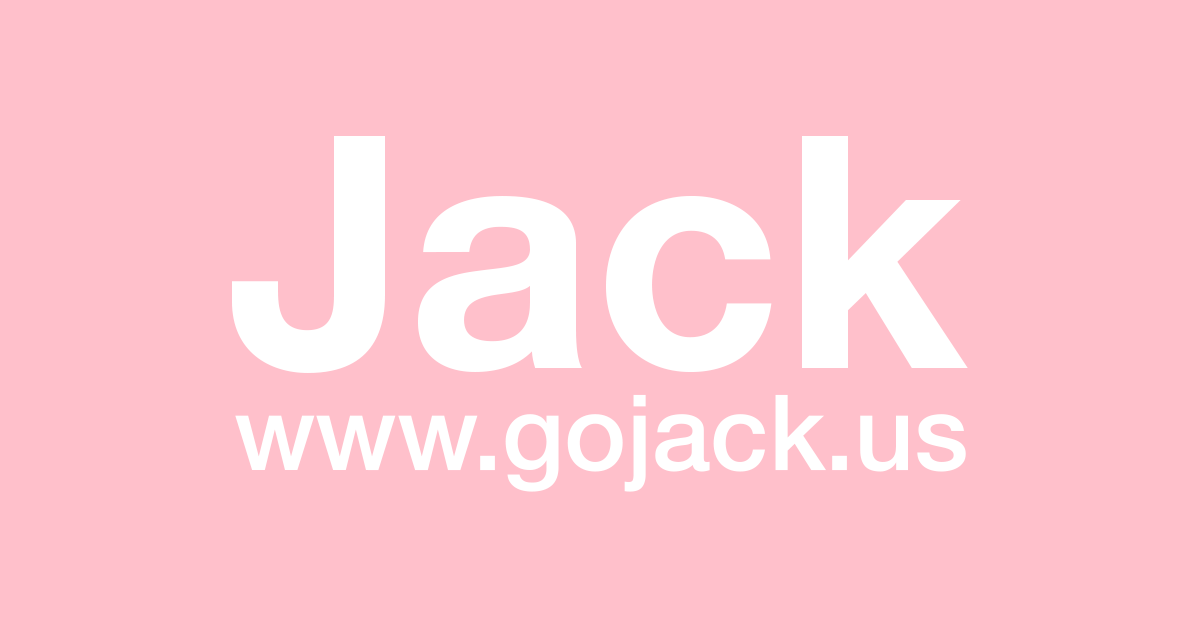
<style>
.page{position:relative;width:1200px;height:630px;background:#ffc0cb}
.page>*{position:absolute;margin:0}
.t1{font:324.4px "HelveticaNeueLTStd-Bd";color:#ffffff}
.t2{font:105.1px "HelveticaNeue-Medium";color:#ffffff}
</style>
<div class="page">
<p class="t1" style="left:232px;top:136px;width:736px;height:237px">Jack</p>
<p class="t2" style="left:235px;top:394px;width:731px;height:98px">www.gojack.us</p>
</div>
